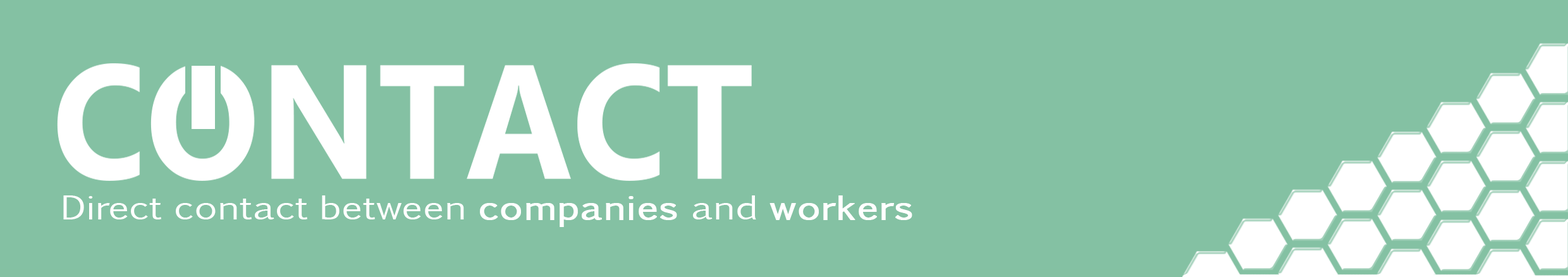
<style>
.page{position:relative;width:1568px;height:277px;background:#84c1a3}
.page>*{position:absolute;margin:0}
.t1{font:31.6px "EuphemiaCAS";color:#ffffff;scale:1.22 1}
.t2{font:31.6px "EuphemiaCAS";color:#ffffff;font-weight:bold;scale:1.22 1}
</style>
<div class="page">
<p class="t1" style="left:63px;top:195px;width:849px;height:32px">Direct contact between <span class="t2">companies </span>and <span class="t2">workers</span></p>
</div>
